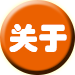
<style>
.page{position:relative;width:75px;height:75px;background:#eb6100}
.page>*{position:absolute;margin:0}
.t1{font:30px "STHupo";color:#ffffff}
</style>
<div class="page">
<p class="t1" style="left:9px;top:24px;width:58px;height:28px">关于</p>
</div>
